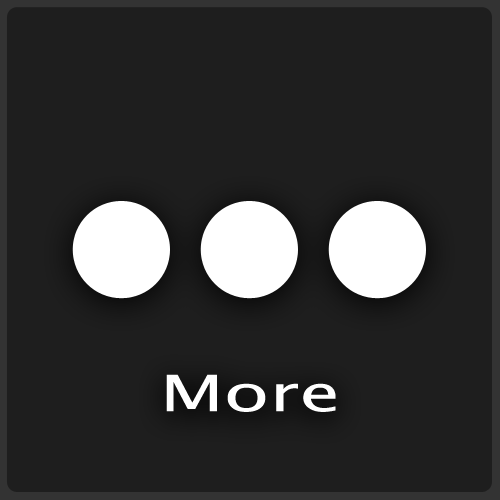
<style>
.page{position:relative;width:500px;height:500px;background:#1e1e1e}
.page>*{position:absolute;margin:0}
.t1{font:50.4px "LucidaGrande";color:#ffffff;scale:1.47 1}
</style>
<div class="page">
<p class="t1" style="left:166px;top:374px;width:170px;height:38px">More</p>
</div>
